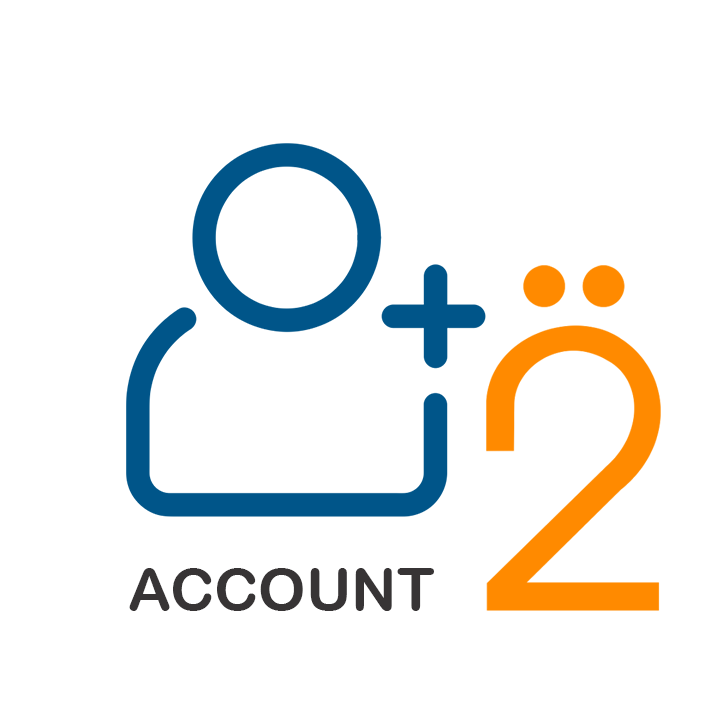
<style>
.page{position:relative;width:719px;height:719px;background:#ffffff}
.page>*{position:absolute;margin:0}
.t1{font:60px "ArialRoundedMTBold";color:#373435}
</style>
<div class="page">
<p class="t1" style="left:129px;top:568px;width:305px;height:43px">ACCOUNT</p>
</div>
